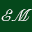
<style>
.page{position:relative;width:32px;height:32px;background:#05481b}
.page>*{position:absolute;margin:0}
.t1{font:16px "SnellRoundhand";color:#ffffff}
</style>
<div class="page">
<p class="t1" style="left:1px;top:9px;width:31px;height:12px">EM</p>
</div>
